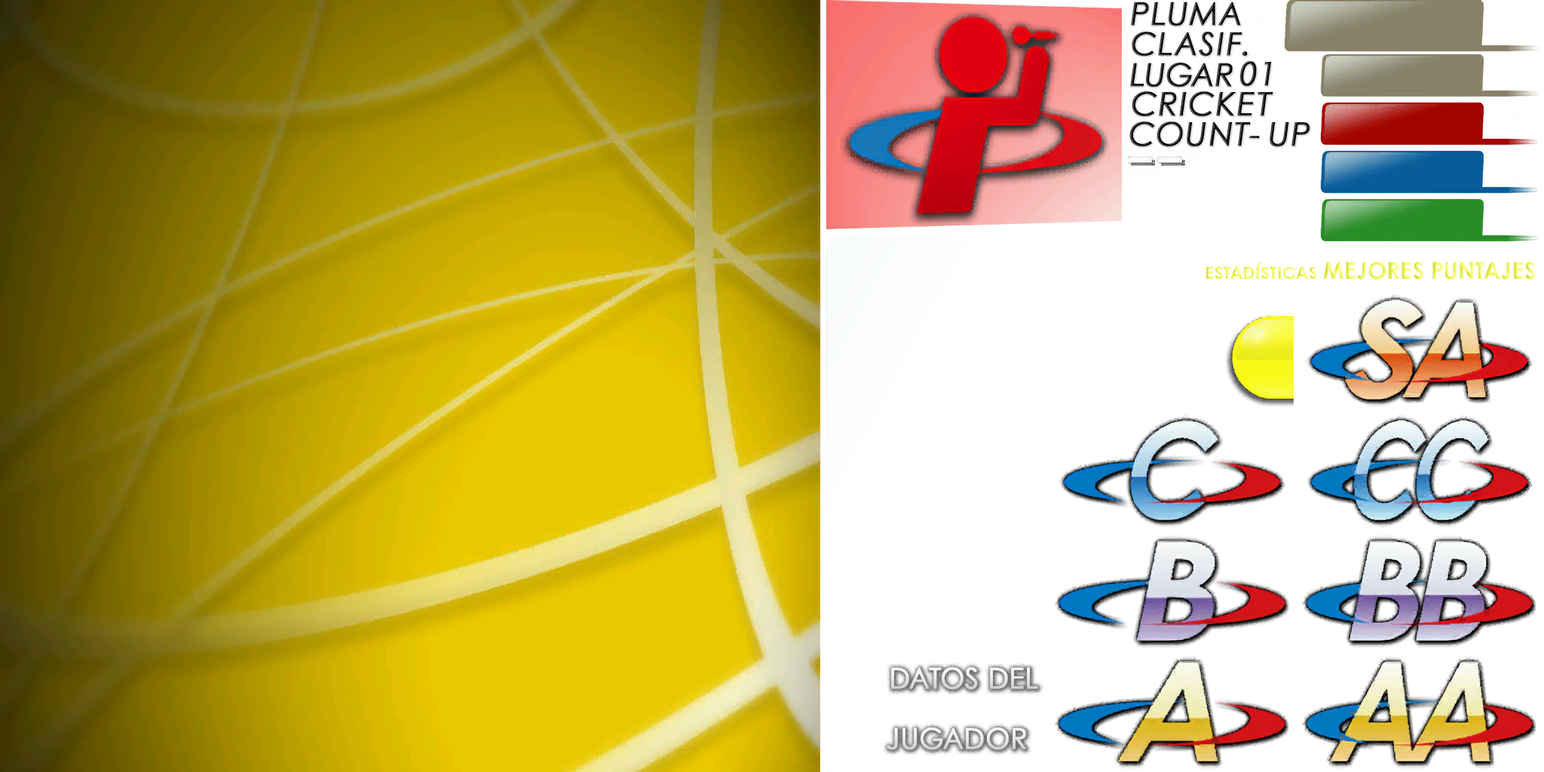
<style>
.page{position:relative;width:1544px;height:772px;background:#ffffff}
.page>*{position:absolute;margin:0}
.t1{font:31.8px "CenturyGothicPaneuropean-Italic";letter-spacing:0.04em;text-transform:uppercase;font-weight:bold}
.t2{font:31.8px "CenturyGothicPaneuropean-Italic";text-transform:uppercase;font-weight:bold}
.t3{font:32.5px "CenturyGothicPaneuropean-Italic";letter-spacing:0.16em;text-transform:uppercase;font-weight:bold}
.t4{font:32.5px "CenturyGothicPaneuropean-Italic";letter-spacing:0.04em;text-transform:uppercase;font-weight:bold}
.t5{font:17.2px "CenturyGothicPaneuropean-Bold";text-transform:uppercase}
.t6{font:23.6px "CenturyGothicPaneuropean-Bold"}
.t7{font:28.7px "CenturyGothicPaneuropean";color:#eaebe9;font-weight:bold;scale:0.97 1}
.t8{font:28.7px "CenturyGothicPaneuropean";color:#e8e9e7;font-weight:bold}
</style>
<div class="page">
<p class="t1" style="left:1131px;top:2px;width:110px;height:24px">Pluma</p>
<p class="t1" style="left:1132px;top:32px;width:116px;height:25px">clasif.</p>
<p class="t2" style="left:1130px;top:63px;width:103px;height:24px">lugar</p>
<p class="t3" style="left:1240px;top:61px;width:31px;height:26px">01</p>
<p class="t4" style="left:1132px;top:91px;width:142px;height:26px">cricket</p>
<p class="t4" style="left:1130px;top:121px;width:180px;height:26px">count- up</p>
<p class="t5" style="left:1206px;top:262px;width:111px;height:17px">estadísticas</p>
<p class="t6" style="left:1323px;top:262px;width:213px;height:18px">MEJORES PUNTAJES</p>
<p class="t7" style="left:891px;top:667px;width:147px;height:23px">DATOS DEL</p>
<p class="t8" style="left:887px;top:728px;width:139px;height:22px">JUGADOR</p>
</div>
